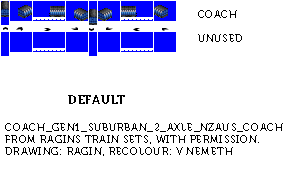
<style>
.page{position:relative;width:300px;height:174px;background:#ffffff}
.page>*{position:absolute;margin:0}
.t1{font:10px "Museo700-Regular";letter-spacing:0.075em;color:#000000;text-transform:uppercase}
.t2{font:12px "Museo700-Regular";letter-spacing:0.075em;color:#000000;text-transform:uppercase}
</style>
<div class="page">
<p class="t1" style="left:198px;top:10px;width:44px;height:32px">coach<br><br>unused</p>
<p class="t2" style="left:68px;top:95px;width:57px;height:9px">DEFAULT</p>
<p class="t1" style="left:5px;top:123px;width:278px;height:33px">Coach_Gen1_Suburban_2_Axle_NZAUS_Coach<br>From Ragins Train Sets, with permission.<br>Drawing: Ragin, recolour: V Nemeth</p>
</div>
